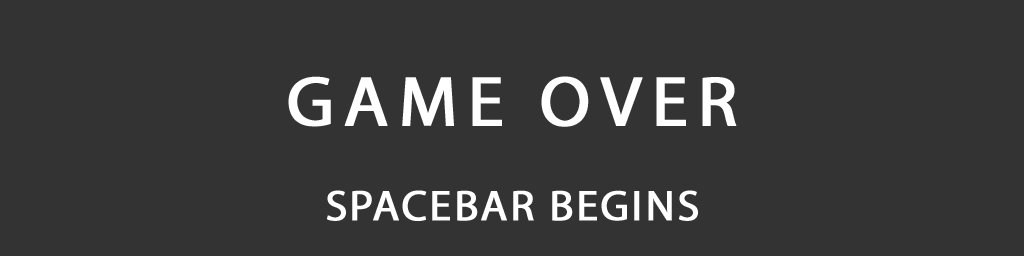
<style>
.page{position:relative;width:1024px;height:256px;background:#333333}
.page>*{position:absolute;margin:0}
.t1{font:71px "MyriadPro-Regular";letter-spacing:0.12em;color:#ffffff;font-weight:bold}
.t2{font:43px "MyriadPro-Regular";letter-spacing:0.04em;color:#ffffff;font-weight:bold}
</style>
<div class="page">
<p class="t1" style="left:288px;top:76px;width:449px;height:51px">GAME OVER</p>
<p class="t2" style="left:327px;top:190px;width:371px;height:31px">SPACEBAR BEGINS</p>
</div>
